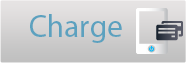
<style>
.page{position:relative;width:186px;height:63px}
.page>*{position:absolute;margin:0}
.t1{font:31.7px "MyriadPro-Regular";letter-spacing:-0.005em;color:#5ca2c0}
</style>
<div class="page">
<p class="t1" style="left:30px;top:14px;width:92px;height:29px">Charge</p>
</div>
